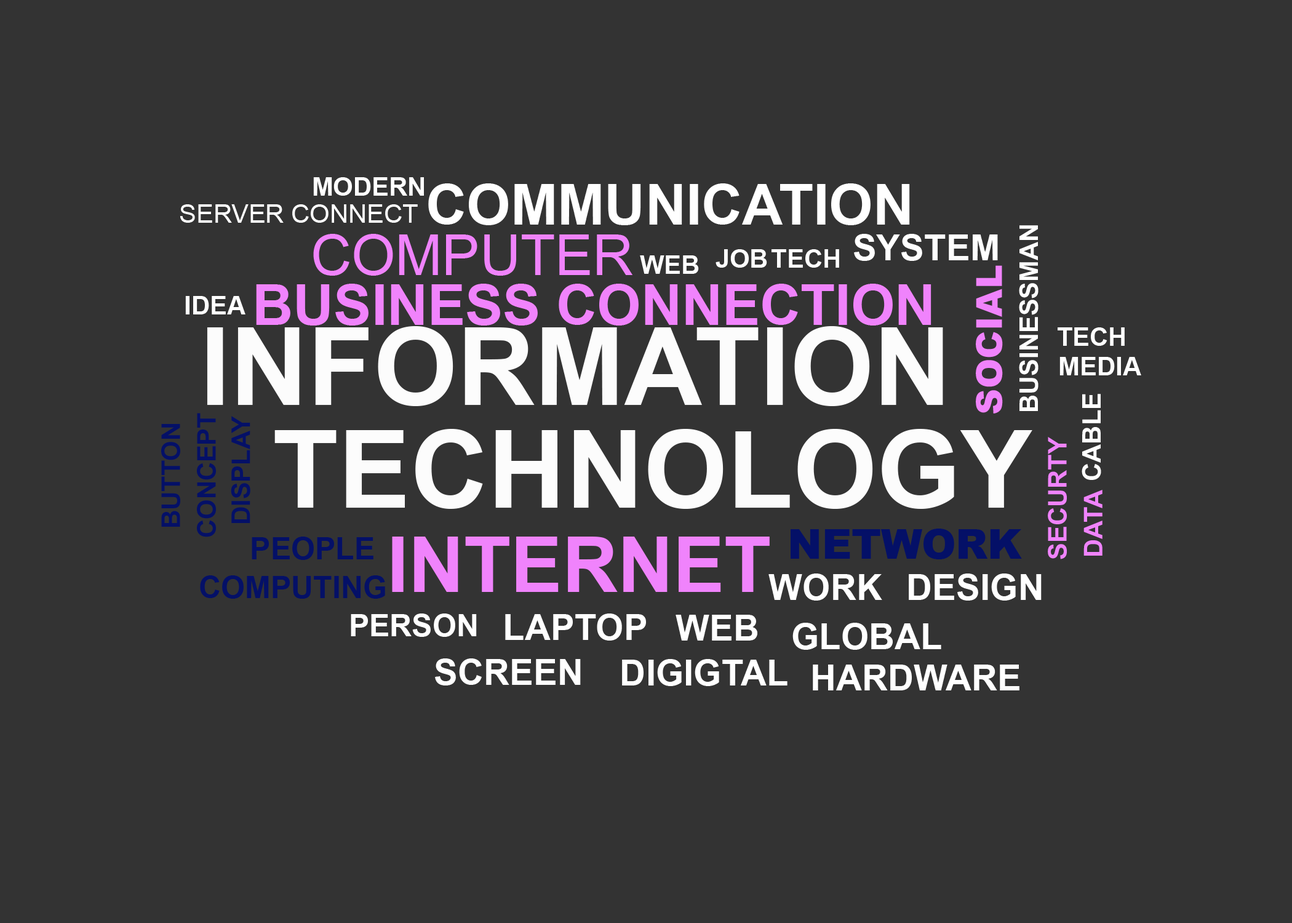
<style>
.page{position:relative;width:1292px;height:923px;background:#333333}
.page>*{position:absolute;margin:0}
.t1{font:25.6px "Arial-BoldMT";color:#ffffff}
.t2{font:56.4px "Arial-BoldMT";color:#ffffff}
.t3{font:25.6px "ArialMT";color:#ffffff}
.t4{font:56.4px "ArialMT";color:#f083fc}
.t5{font:35.9px "Arial-BoldMT";color:#ffffff}
.t6{font:35.9px "Arial-Black";color:#f083fc}
.t7{font:56.4px "Arial-BoldMT";color:#f083fc}
.t8{font:107.7px "Arial-BoldMT";color:#fcfcfc}
.t9{font:25.6px "Arial-BoldMT";color:#041067}
.t10{font:25.6px "Arial-BoldMT";color:#f083fc}
.t11{font:41px "Arial-Black";color:#041067}
.t12{font:30.8px "Arial-BoldMT";color:#041067}
.t13{font:76.9px "Arial-BoldMT";color:#f083fc}
.t14{font:30.8px "Arial-BoldMT";color:#ffffff}
</style>
<div class="page">
<p class="t1" style="left:313px;top:177px;width:111px;height:19px">MODERN</p>
<p class="t2" style="left:428px;top:183px;width:482px;height:42px">COMMUNICATION</p>
<p class="t3" style="left:180px;top:204px;width:238px;height:19px">SERVER CONNECT</p>
<p class="t4" style="left:313px;top:234px;width:319px;height:42px">COMPUTER</p>
<p class="t5" style="left:854px;top:234px;width:144px;height:27px">SYSTEM</p>
<p class="t1" style="left:1019px;top:225px;width:20px;height:186px;rotate:-90deg">BUSINESSMAN</p>
<p class="t1" style="left:640px;top:255px;width:59px;height:19px">WEB</p>
<p class="t1" style="left:716px;top:249px;width:51px;height:19px">JOB</p>
<p class="t1" style="left:772px;top:249px;width:67px;height:19px">TECH</p>
<p class="t6" style="left:976px;top:265px;width:27px;height:148px;rotate:-90deg">SOCIAL</p>
<p class="t7" style="left:256px;top:284px;width:676px;height:41px">BUSINESS CONNECTION</p>
<p class="t1" style="left:185px;top:296px;width:60px;height:18px">IDEA</p>
<p class="t8" style="left:207px;top:326px;width:736px;height:80px">INFORMATION</p>
<p class="t1" style="left:1058px;top:327px;width:67px;height:19px">TECH</p>
<p class="t1" style="left:1059px;top:357px;width:82px;height:18px">MEDIA</p>
<p class="t1" style="left:1082px;top:394px;width:19px;height:86px;rotate:-90deg">CABLE</p>
<p class="t9" style="left:197px;top:413px;width:19px;height:124px;rotate:-90deg">CONCEPT</p>
<p class="t9" style="left:161px;top:424px;width:19px;height:103px;rotate:-90deg">BUTTON</p>
<p class="t9" style="left:231px;top:416px;width:19px;height:107px;rotate:-90deg">DISPLAY</p>
<p class="t8" style="left:274px;top:429px;width:758px;height:80px">TECHNOLOGY</p>
<p class="t10" style="left:1048px;top:437px;width:19px;height:122px;rotate:-90deg">SECURTY</p>
<p class="t10" style="left:1083px;top:490px;width:20px;height:66px;rotate:-90deg">DATA</p>
<p class="t11" style="left:791px;top:529px;width:231px;height:30px">NETWORK</p>
<p class="t12" style="left:252px;top:537px;width:121px;height:23px">PEOPLE</p>
<p class="t13" style="left:392px;top:537px;width:378px;height:55px">INTERNET</p>
<p class="t12" style="left:200px;top:575px;width:185px;height:24px">COMPUTING</p>
<p class="t5" style="left:768px;top:573px;width:114px;height:27px">WORK</p>
<p class="t5" style="left:909px;top:573px;width:133px;height:27px">DESIGN</p>
<p class="t14" style="left:351px;top:613px;width:126px;height:24px">PERSON</p>
<p class="t5" style="left:505px;top:613px;width:141px;height:27px">LAPTOP</p>
<p class="t5" style="left:676px;top:615px;width:81px;height:25px">WEB</p>
<p class="t5" style="left:792px;top:623px;width:149px;height:27px">GLOBAL</p>
<p class="t5" style="left:435px;top:658px;width:146px;height:27px">SCREEN</p>
<p class="t5" style="left:622px;top:659px;width:166px;height:27px">DIGIGTAL</p>
<p class="t5" style="left:813px;top:664px;width:206px;height:26px">HARDWARE</p>
</div>
